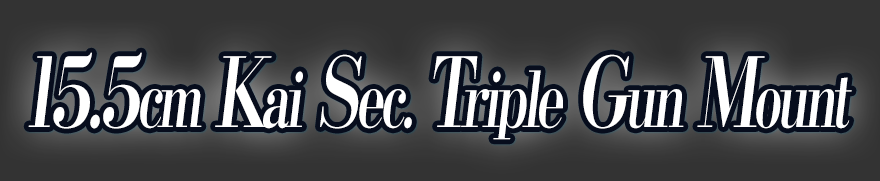
<style>
.page{position:relative;width:880px;height:181px;background:#333333}
.page>*{position:absolute;margin:0}
.t1{font:76.8px "KochoStd-Heavy";letter-spacing:-0.08em;color:#ffffff;font-style:italic;scale:0.68 1}
.t2{font:96px "KochoStd-Heavy";letter-spacing:-0.08em;color:#ffffff;font-style:italic;scale:0.68 1}
</style>
<div class="page">
<p class="t1" style="left:28px;top:52px;width:824px;height:88px"><span class="t2">15.5</span>cm<span class="t2"> K</span>ai<span class="t2"> S</span>ec.<span class="t2"> T</span>riple<span class="t2"> G</span>un<span class="t2"> M</span>ount</p>
</div>
